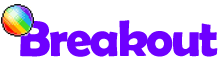
<style>
.page{position:relative;width:220px;height:70px;background:#ffffff}
.page>*{position:absolute;margin:0}
.t1{font:51px "BerlinSansFBDemi-Bold";letter-spacing:-0.04em;color:#6e00ff}
</style>
<div class="page">
<p class="t1" style="left:20px;top:20px;width:198px;height:37px">Breakout</p>
</div>
